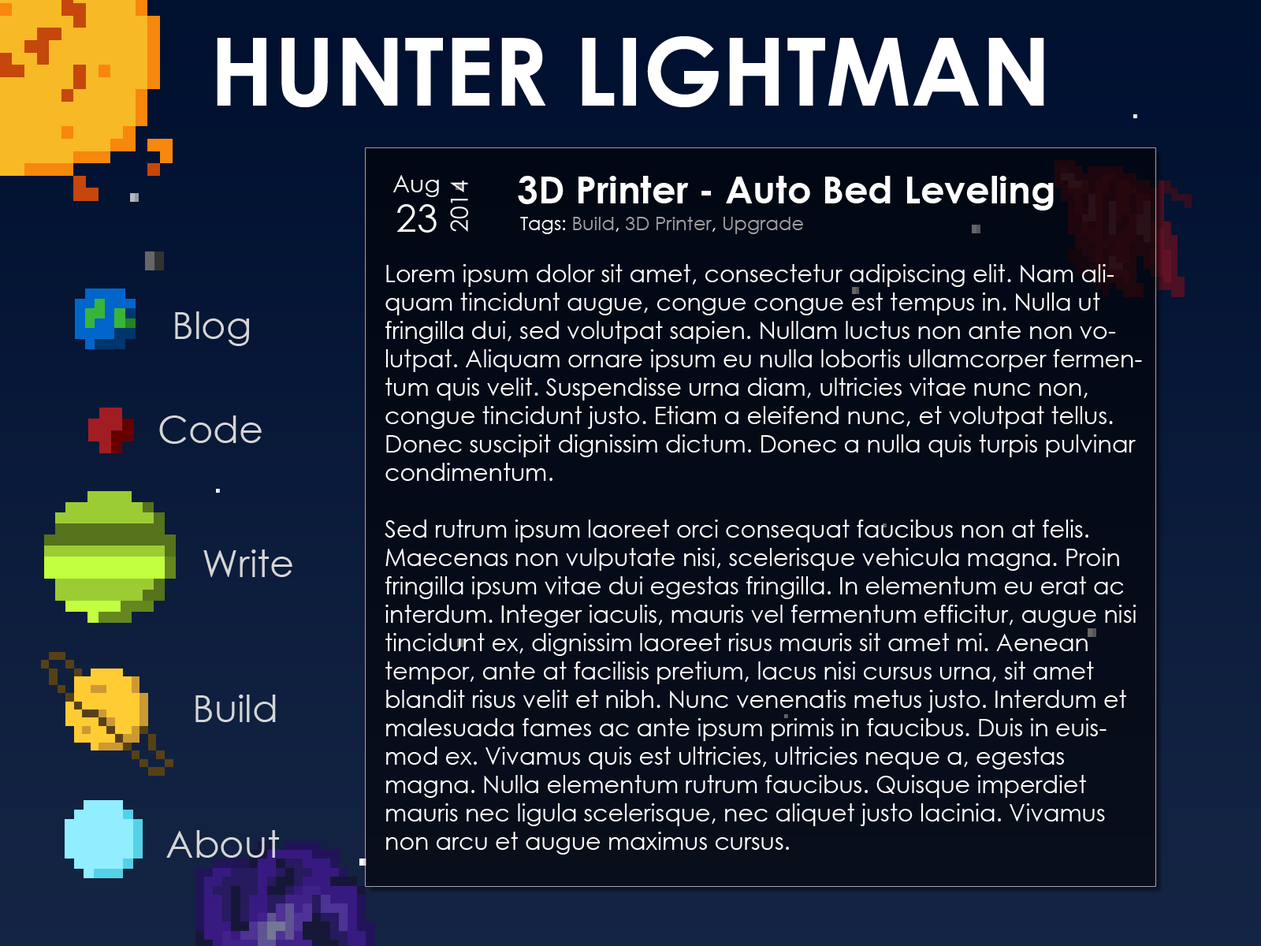
<style>
.page{position:relative;width:1261px;height:946px}
.page>*{position:absolute;margin:0}
.t1{font:94.6px "CenturyGothic-Bold";color:#ffffff}
.t2{font:23.6px "CenturyGothic";color:#ffffff}
.t3{font:37.8px "CenturyGothic-Bold";color:#ffffff}
.t4{font:37.8px "CenturyGothic";color:#ffffff}
.t5{font:18.9px "CenturyGothic";color:#9f9f9f}
.t6{font:18.9px "CenturyGothic";color:#ffffff}
.t7{font:37.8px "CenturyGothic";color:#d5d5d5}
</style>
<div class="page">
<p class="t1" style="left:217px;top:36px;width:827px;height:71px">HUNTER LIGHTMAN</p>
<p class="t2" style="left:393px;top:175px;width:46px;height:22px">Aug</p>
<p class="t2" style="left:450px;top:180px;width:19px;height:52px;rotate:-90deg">2014</p>
<p class="t3" style="left:518px;top:176px;width:536px;height:34px">3D Printer - Auto Bed Leveling</p>
<p class="t4" style="left:396px;top:204px;width:41px;height:28px">23</p>
<p class="t5" style="left:520px;top:217px;width:283px;height:17px"><span class="t6">Tags: </span>Build<span class="t6">, </span>3D Printer<span class="t6">, </span>Upgrade</p>
<p class="t2" style="left:385px;top:264px;width:757px;height:590px">Lorem ipsum dolor sit amet, consectetur adipiscing elit. Nam aliquam tincidunt augue, congue congue est tempus in. Nulla ut fringilla dui, sed volutpat sapien. Nullam luctus non ante non volutpat. Aliquam ornare ipsum eu nulla lobortis ullamcorper fermentum quis velit. Suspendisse urna diam, ultricies vitae nunc non, congue tincidunt justo. Etiam a eleifend nunc, et volutpat tellus. Donec suscipit dignissim dictum. Donec a nulla quis turpis pulvinar condimentum.<br><br>Sed rutrum ipsum laoreet orci consequat faucibus non at felis. Maecenas non vulputate nisi, scelerisque vehicula magna. Proin fringilla ipsum vitae dui egestas fringilla. In elementum eu erat ac interdum. Integer iaculis, mauris vel fermentum efficitur, augue nisi tincidunt ex, dignissim laoreet risus mauris sit amet mi. Aenean tempor, ante at facilisis pretium, lacus nisi cursus urna, sit amet blandit risus velit et nibh. Nunc venenatis metus justo. Interdum et malesuada fames ac ante ipsum primis in faucibus. Duis in euismod ex. Vivamus quis est ultricies, ultricies neque a, egestas magna. Nulla elementum rutrum faucibus. Quisque imperdiet mauris nec ligula scelerisque, nec aliquet justo lacinia. Vivamus non arcu et augue maximus cursus.<br><br>Duis sit amet arcu maximus, facilisis est efficitur, convallis urna. Etiam vehicula lectus eget elit placerat, sed commodo urna porta. Sed id fermentum leo, id eleifend dolor. Nulla iaculis fringilla ligula semper placerat. Vivamus elementum porttitor eros, sed auctor dui pulvinar id. Nulla sed metus et nisl ornare malesuada vel et leo. Donec nec tempus lorem, sit amet lobortis nibh. Phasellus id magna ac lacus ultricies congue.</p>
<p class="t7" style="left:175px;top:311px;width:74px;height:35px">Blog</p>
<p class="t7" style="left:159px;top:415px;width:103px;height:29px">Code</p>
<p class="t7" style="left:203px;top:549px;width:89px;height:28px">Write</p>
<p class="t7" style="left:195px;top:694px;width:81px;height:28px">Build</p>
<p class="t7" style="left:166px;top:830px;width:113px;height:27px">About</p>
</div>
